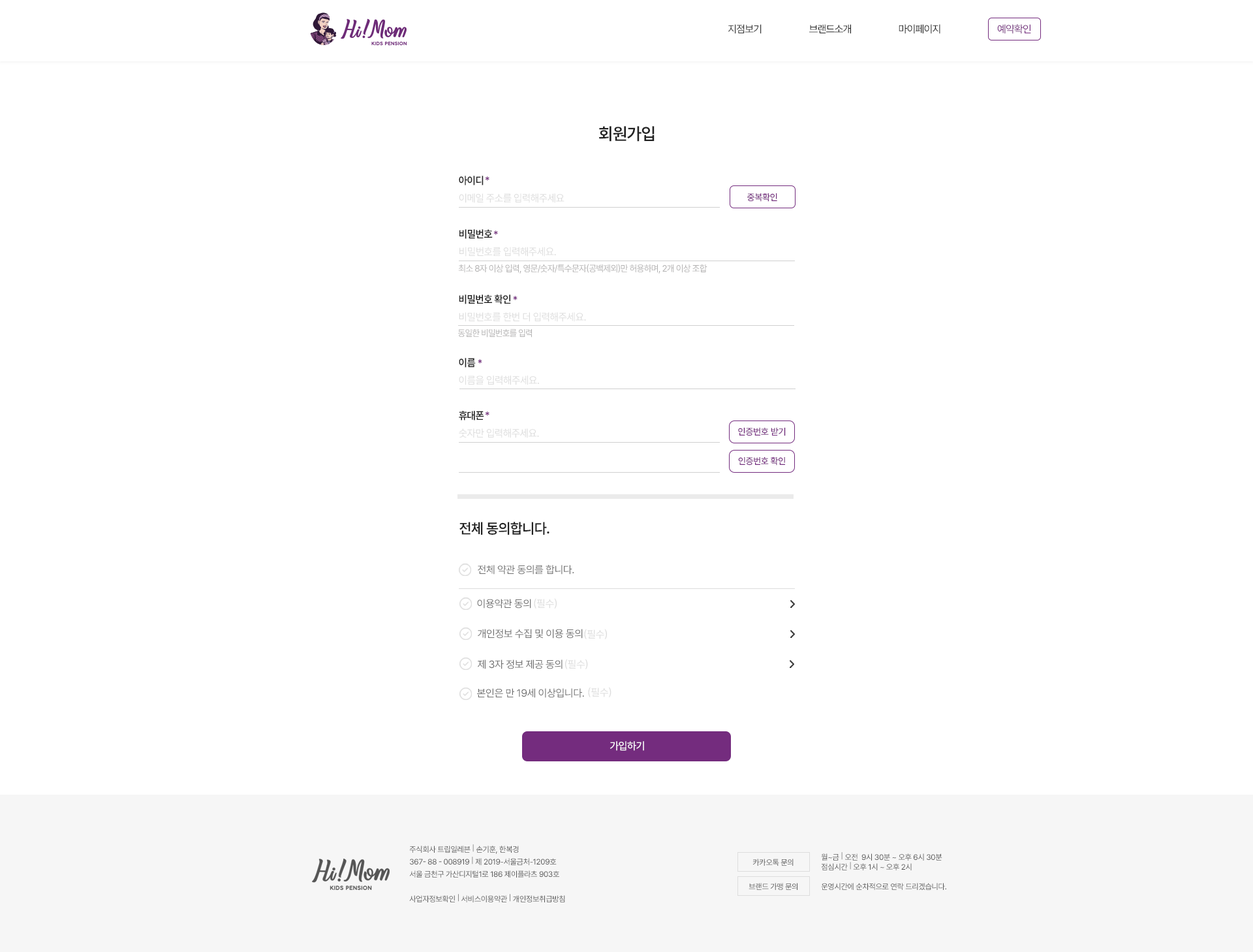
<style>
.page{position:relative;width:1253px;height:952px;background:#ffffff}
.page>*{position:absolute;margin:0}
.t1{font:10.4px "Pretendard-Regular";letter-spacing:-0.05em;color:#333333}
.t2{font:10.4px "Pretendard-Regular";letter-spacing:-0.05em;color:#222222}
.t3{font:10.4px "Pretendard-Regular";letter-spacing:-0.05em;color:#742c7e}
.t4{font:17px "Pretendard-SemiBold";letter-spacing:-0.025em;color:#222222;text-transform:uppercase}
.t5{font:10.4px "Pretendard-SemiBold";letter-spacing:-0.025em;color:#222222;text-transform:uppercase;scale:0.96 1}
.t6{font:10.4px "Pretendard-SemiBold";letter-spacing:-0.025em;color:#742c7e;text-transform:uppercase;scale:0.96 1}
.t7{font:10.4px "Pretendard-Regular";letter-spacing:-0.025em;color:#dddddd;scale:0.96 1}
.t8{font:9.1px "Pretendard-Medium";letter-spacing:-0.025em;color:#742c7e;text-transform:uppercase}
.t9{font:10.4px "Pretendard-Regular";letter-spacing:-0.025em;color:#dddddd;text-transform:uppercase;scale:0.97 1}
.t10{font:9.1px "Pretendard-Regular";letter-spacing:-0.05em;color:#b3b2b2;text-transform:uppercase}
.t11{font:9.1px "Pretendard-Regular";letter-spacing:-0.05em;color:#b3b2b2;text-transform:uppercase;scale:0.96 1}
.t12{font:10.5px "Pretendard-Regular";letter-spacing:-0.025em;color:#dddddd;text-transform:uppercase;scale:0.97 1}
.t13{font:14.4px "Pretendard-SemiBold";letter-spacing:-0.025em;color:#222222;text-transform:uppercase}
.t14{font:10.4px "Pretendard-Regular";letter-spacing:-0.025em;color:#717171;text-transform:uppercase}
.t15{font:10.4px "Pretendard-Regular";letter-spacing:-0.025em;color:#dddddd;text-transform:uppercase}
.t16{font:10.4px "Pretendard-Medium";letter-spacing:-0.025em;color:#ffffff;text-transform:uppercase}
.t17{font:7.8px/12.4px "Pretendard-Regular";letter-spacing:-0.025em;color:#555555}
.t18{font:7.8px/9.8px "Pretendard-Regular";letter-spacing:-0.025em;color:#555555}
.t19{font:7.8px "Pretendard-Regular";letter-spacing:-0.025em;color:#555555}
</style>
<div class="page">
<p class="t1" style="left:728px;top:24px;width:34px;height:10px">지점보기</p>
<p class="t2" style="left:809px;top:24px;width:42px;height:10px">브랜드소개</p>
<p class="t2" style="left:899px;top:24px;width:41px;height:10px">마이페이지</p>
<p class="t3" style="left:997px;top:24px;width:34px;height:10px">예약확인</p>
<p class="t4" style="left:598px;top:126px;width:57px;height:16px">회원가입</p>
<p class="t5" style="left:459px;top:176px;width:25px;height:9px">아이디</p>
<p class="t6" style="left:485px;top:176px;width:4px;height:5px">*</p>
<p class="t7" style="left:459px;top:193px;width:106px;height:10px">이메일 주소를 입력해주세요</p>
<p class="t8" style="left:747px;top:193px;width:30px;height:9px">중복확인</p>
<p class="t5" style="left:459px;top:229px;width:34px;height:10px">비밀번호</p>
<p class="t6" style="left:493px;top:230px;width:5px;height:5px">*</p>
<p class="t9" style="left:459px;top:247px;width:97px;height:9px">비밀번호를 입력해주세요.</p>
<p class="t10" style="left:458px;top:264px;width:249px;height:9px">최소 8자 이상 입력, 영문/숫자/특수문자(공백제외)만 허용하며, 2개 이상 조합</p>
<p class="t5" style="left:459px;top:294px;width:52px;height:10px">비밀번호 확인</p>
<p class="t6" style="left:513px;top:296px;width:5px;height:4px">*</p>
<p class="t9" style="left:459px;top:312px;width:127px;height:10px">비밀번호를 한번 더 입력해주세요.</p>
<p class="t11" style="left:458px;top:329px;width:74px;height:8px">동일한 비밀번호를 입력</p>
<p class="t5" style="left:459px;top:358px;width:17px;height:9px">이름</p>
<p class="t6" style="left:478px;top:359px;width:4px;height:5px">*</p>
<p class="t12" style="left:459px;top:375px;width:80px;height:10px">이름을 입력해주세요.</p>
<p class="t5" style="left:459px;top:411px;width:25px;height:9px">휴대폰</p>
<p class="t6" style="left:485px;top:411px;width:4px;height:5px">*</p>
<p class="t7" style="left:459px;top:428px;width:80px;height:10px">숫자만 입력해주세요.</p>
<p class="t8" style="left:738px;top:427px;width:48px;height:9px">인증번호 받기</p>
<p class="t8" style="left:738px;top:456px;width:47px;height:9px">인증번호 확인</p>
<p class="t13" style="left:459px;top:521px;width:91px;height:14px">전체 동의합니다.</p>
<p class="t14" style="left:478px;top:565px;width:96px;height:9px">전체 약관 동의를 합니다.</p>
<p class="t14" style="left:477px;top:598px;width:54px;height:10px">이용약관 동의</p>
<p class="t15" style="left:534px;top:598px;width:23px;height:10px">(필수)</p>
<p class="t14" style="left:478px;top:629px;width:105px;height:9px">개인정보 수집 및 이용 동의</p>
<p class="t15" style="left:584px;top:629px;width:23px;height:10px">(필수)</p>
<p class="t14" style="left:478px;top:659px;width:85px;height:10px">제 3자 정보 제공 동의</p>
<p class="t15" style="left:565px;top:659px;width:23px;height:10px">(필수)</p>
<p class="t14" style="left:477px;top:688px;width:107px;height:10px">본인은 만 19세 이상입니다.</p>
<p class="t15" style="left:588px;top:687px;width:24px;height:10px">(필수)</p>
<p class="t16" style="left:610px;top:741px;width:34px;height:10px">가입하기</p>
<p class="t17" style="left:409px;top:844px;width:156px;height:58px">주식회사 트립일레븐 | 손기훈, 한복경<br>367- 88 - 008919 | 제 2019-서울금처-1209호<br>서울 금천구 가산디지털1로 186 제이플라츠 903호<br><br>사업자정보확인 | 서비스이용약관 | 개인정보취급방침</p>
<p class="t18" style="left:821px;top:852px;width:121px;height:18px">월~금 | 오전  9시 30분 ~ 오후 6시 30분<br>점심시간 | 오후 1시 ~ 오후 2시</p>
<p class="t19" style="left:753px;top:858px;width:41px;height:7px">카카오톡 문의</p>
<p class="t19" style="left:749px;top:882px;width:49px;height:8px">브랜드 가맹 문의</p>
<p class="t19" style="left:821px;top:882px;width:125px;height:8px">운영시간에 순차적으로 연락 드리겠습니다.</p>
</div>
